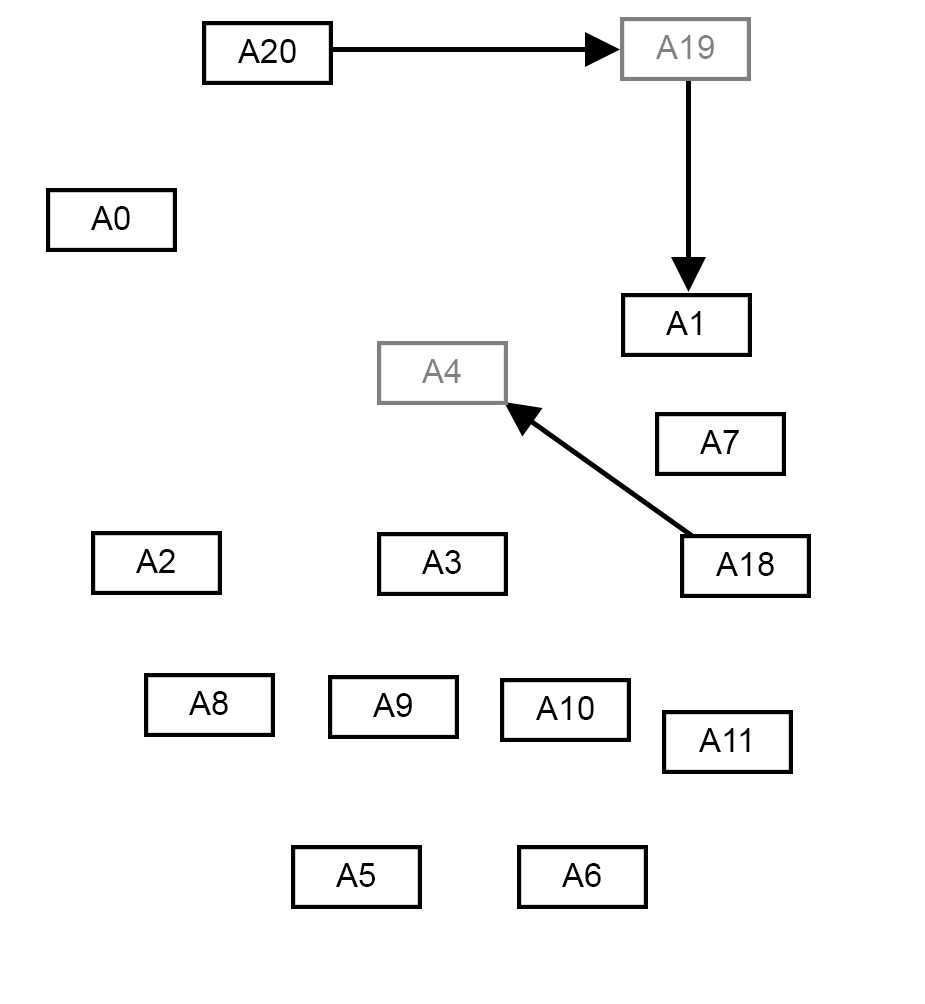
<style>
.page{position:relative;width:925px;height:1004px;background:#ffffff}
.page>*{position:absolute;margin:0}
.t1{font:33.3px "ArialMT";color:#000000}
.t2{font:33.3px "ArialMT";color:#808080}
</style>
<div class="page">
<p class="t1" style="left:238px;top:39px;width:58px;height:24px">A20</p>
<p class="t2" style="left:656px;top:35px;width:58px;height:24px">A19</p>
<p class="t1" style="left:91px;top:206px;width:39px;height:24px">A0</p>
<p class="t1" style="left:666px;top:311px;width:35px;height:24px">A1</p>
<p class="t2" style="left:422px;top:359px;width:39px;height:24px">A4</p>
<p class="t1" style="left:700px;top:430px;width:39px;height:24px">A7</p>
<p class="t1" style="left:136px;top:549px;width:39px;height:24px">A2</p>
<p class="t1" style="left:422px;top:550px;width:39px;height:24px">A3</p>
<p class="t1" style="left:716px;top:552px;width:58px;height:24px">A18</p>
<p class="t1" style="left:189px;top:691px;width:39px;height:24px">A8</p>
<p class="t1" style="left:373px;top:693px;width:39px;height:24px">A9</p>
<p class="t1" style="left:536px;top:696px;width:58px;height:24px">A10</p>
<p class="t1" style="left:699px;top:728px;width:51px;height:24px">A11</p>
<p class="t1" style="left:336px;top:863px;width:39px;height:24px">A5</p>
<p class="t1" style="left:562px;top:863px;width:39px;height:24px">A6</p>
</div>
